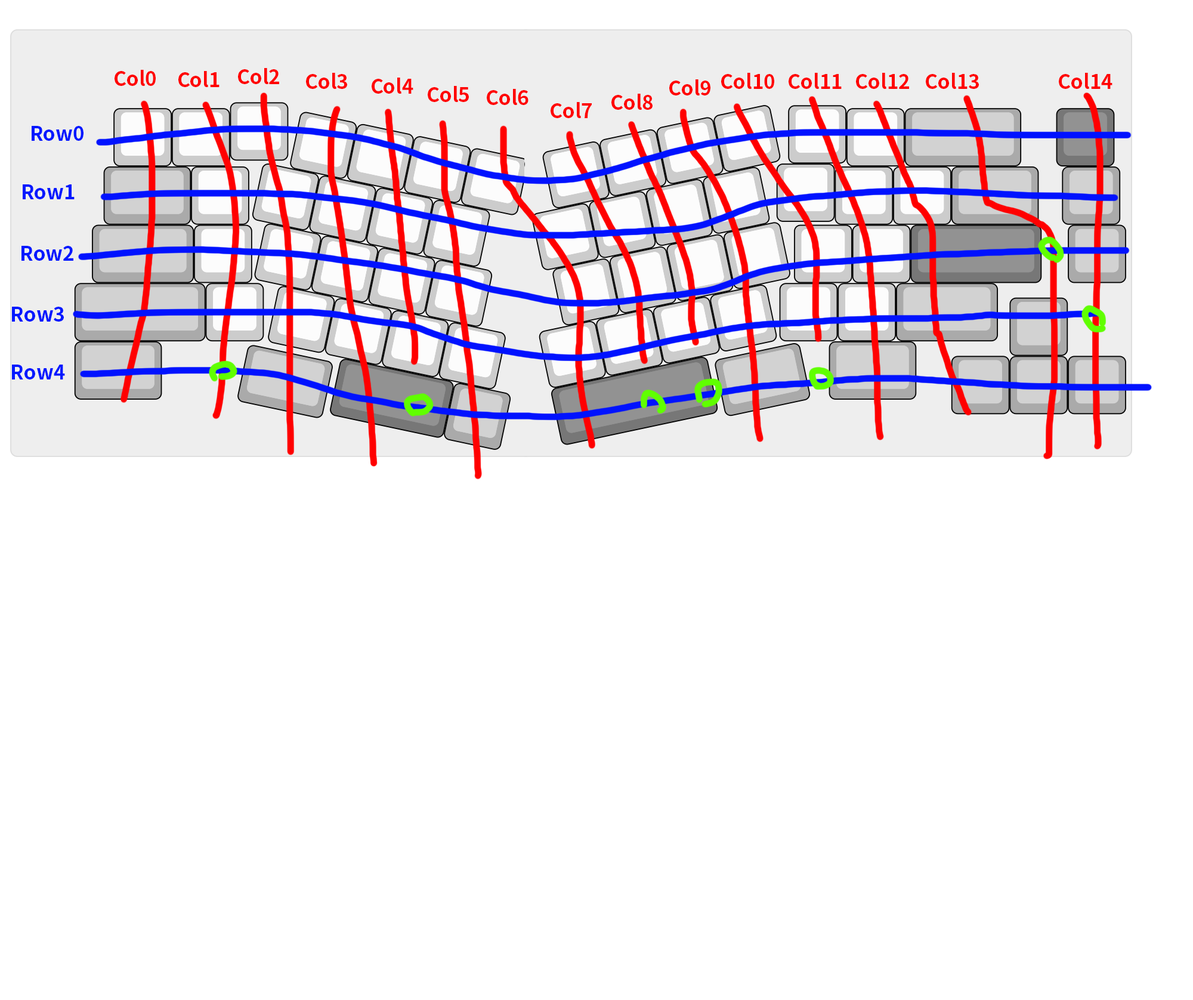
<style>
.page{position:relative;width:1193px;height:1000px;background:#ffffff}
.page>*{position:absolute;margin:0}
.t1{font:19.9px "NotoSansCJKjp-Bold";color:#ff0000}
.t2{font:19.9px "NotoSansCJKjp-Bold";color:#0018ff}
</style>
<div class="page">
<p class="t1" style="left:115px;top:70px;width:41px;height:16px">Col0</p>
<p class="t1" style="left:178px;top:71px;width:41px;height:16px">Col1</p>
<p class="t1" style="left:238px;top:68px;width:41px;height:16px">Col2</p>
<p class="t1" style="left:306px;top:73px;width:41px;height:16px">Col3</p>
<p class="t1" style="left:372px;top:78px;width:41px;height:16px">Col4</p>
<p class="t1" style="left:721px;top:73px;width:53px;height:16px">Col10</p>
<p class="t1" style="left:788px;top:73px;width:54px;height:16px">Col11</p>
<p class="t1" style="left:856px;top:73px;width:53px;height:16px">Col12</p>
<p class="t1" style="left:926px;top:73px;width:53px;height:16px">Col13</p>
<p class="t1" style="left:1059px;top:73px;width:53px;height:16px">Col14</p>
<p class="t1" style="left:428px;top:86px;width:41px;height:16px">Col5</p>
<p class="t1" style="left:487px;top:89px;width:41px;height:16px">Col6</p>
<p class="t1" style="left:669px;top:79px;width:41px;height:16px">Col9</p>
<p class="t1" style="left:551px;top:102px;width:41px;height:16px">Col7</p>
<p class="t1" style="left:611px;top:94px;width:42px;height:16px">Col8</p>
<p class="t2" style="left:32px;top:126px;width:52px;height:15px">Row0</p>
<p class="t2" style="left:23px;top:184px;width:52px;height:15px">Row1</p>
<p class="t2" style="left:21px;top:246px;width:52px;height:15px">Row2</p>
<p class="t2" style="left:12px;top:307px;width:52px;height:14px">Row3</p>
<p class="t2" style="left:12px;top:364px;width:53px;height:15px">Row4</p>
</div>
